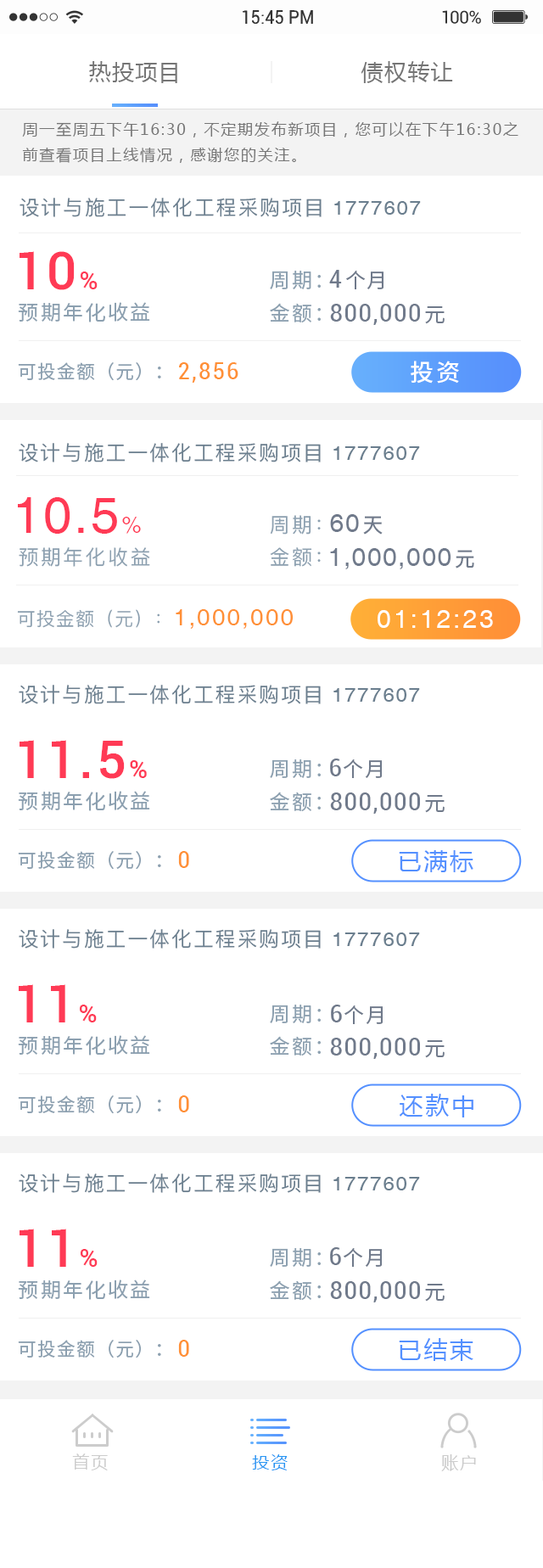
<style>
.page{position:relative;width:543px;height:1568px;background:#ffffff}
.page>*{position:absolute;margin:0}
.t1{font:17.4px "Roboto-Regular";color:#333333}
.t2{font:17.4px "Roboto-Regular";letter-spacing:-0.02em;color:#333333}
.t3{font:22.1px "MicrosoftYaHei";letter-spacing:0.05em;color:#757575}
.t4{font:15.3px/25.5px "MicrosoftYaHei";letter-spacing:0.1em;color:#757575}
.t5{font:20.4px "PingFang-SC-Medium";letter-spacing:0.075em;color:#6a7e8e}
.t6{font:20.4px "Helvetica";letter-spacing:0.075em;color:#6a7e8e}
.t7{font:52.6px "Roboto-Medium";letter-spacing:0.05em;color:#ff3a55}
.t8{font:25.5px "Roboto-Medium";letter-spacing:0.05em;color:#ff3a55}
.t9{font:20.4px "SourceHanSansCN-Regular";letter-spacing:0.05em;color:#6f798a}
.t10{font:25.5px "Roboto-Condensed";letter-spacing:0.05em;color:#6f798a}
.t11{font:20.4px "SourceHanSansCN-Regular";letter-spacing:0.1em;color:#8ca0b0}
.t12{font:25.5px "Roboto-Condensed";letter-spacing:0.05em;color:#707a8b}
.t13{font:20.4px "SourceHanSansCN-Regular";letter-spacing:0.05em;color:#707a8b}
.t14{font:18.7px "SourceHanSansCN-Regular";letter-spacing:0.05em;color:#8ca0b0}
.t15{font:23.8px "Roboto-Condensed";letter-spacing:0.075em;color:#ff9036}
.t16{font:23.8px "SourceHanSansCN-Medium";letter-spacing:0.1em;color:#ffffff}
.t17{font:50.9px "Helvetica";letter-spacing:0.05em;color:#ff3a55}
.t18{font:22.1px "Helvetica";letter-spacing:0.05em;color:#ff3a55}
.t19{font:20.4px "PingFang-SC-Medium";letter-spacing:0.1em;color:#8ca0b0}
.t20{font:25.5px "Helvetica";letter-spacing:0.05em;color:#707a8b}
.t21{font:20.4px "PingFang-SC-Bold";letter-spacing:0.05em;color:#707a8b}
.t22{font:18.7px "PingFang-SC-Medium";letter-spacing:0.05em;color:#8ca0b0}
.t23{font:23.8px "Helvetica";letter-spacing:0.075em;color:#ff9036}
.t24{font:25.5px "Helvetica";letter-spacing:0.1em;color:#ffffff}
.t25{font:23.8px "MicrosoftYaHei";letter-spacing:0.1em;color:#5490ff}
.t26{font:17px "MicrosoftYaHei";letter-spacing:0.1em;color:#cccccc}
.t27{font:17px "MicrosoftYaHei";letter-spacing:0.1em;color:#2696f3}
</style>
<div class="page">
<p class="t1" style="left:243px;top:10px;width:70px;height:14px">15:45 PM</p>
<p class="t2" style="left:442px;top:10px;width:39px;height:14px">100%</p>
<p class="t3" style="left:89px;top:61px;width:88px;height:22px">热投项目</p>
<p class="t3" style="left:89px;top:61px;width:88px;height:22px">热投项目</p>
<p class="t3" style="left:361px;top:61px;width:92px;height:22px">债权转让</p>
<p class="t3" style="left:361px;top:61px;width:92px;height:22px">债权转让</p>
<p class="t4" style="left:22px;top:121px;width:496px;height:42px">周一至周五下午16:30，不定期发布新项目，您可以在下午16:30之<br>前查看项目上线情况，感谢您的关注。</p>
<p class="t5" style="left:20px;top:198px;width:401px;height:19px">设计与施工一体化工程采购项目 <span class="t6">1777607</span></p>
<p class="t7" style="left:20px;top:251px;width:78px;height:39px">10<span class="t8">%</span></p>
<p class="t9" style="left:329px;top:270px;width:55px;height:19px"><span class="t10">4</span>个月</p>
<p class="t11" style="left:270px;top:271px;width:51px;height:18px">周期：</p>
<p class="t11" style="left:18px;top:302px;width:132px;height:20px">预期年化收益</p>
<p class="t11" style="left:270px;top:303px;width:51px;height:20px">金额：</p>
<p class="t12" style="left:330px;top:304px;width:115px;height:21px">800,000<span class="t13">元</span></p>
<p class="t14" style="left:18px;top:362px;width:143px;height:19px">可投金额（元）：</p>
<p class="t15" style="left:179px;top:362px;width:59px;height:21px">2,856</p>
<p class="t16" style="left:411px;top:361px;width:48px;height:23px">投资</p>
<p class="t5" style="left:19px;top:443px;width:401px;height:19px">设计与施工一体化工程采购项目 <span class="t6">1777607</span></p>
<p class="t17" style="left:18px;top:497px;width:123px;height:37px">10.5<span class="t18">%</span></p>
<p class="t19" style="left:270px;top:515px;width:51px;height:20px">周期：</p>
<p class="t20" style="left:330px;top:514px;width:53px;height:21px">60<span class="t21">天</span></p>
<p class="t19" style="left:19px;top:547px;width:131px;height:20px">预期年化收益</p>
<p class="t19" style="left:270px;top:547px;width:51px;height:20px">金额：</p>
<p class="t20" style="left:330px;top:548px;width:144px;height:21px">1,000,000<span class="t21">元</span></p>
<p class="t22" style="left:17px;top:609px;width:143px;height:19px">可投金额（元）：</p>
<p class="t23" style="left:176px;top:609px;width:117px;height:20px">1,000,000</p>
<p class="t24" style="left:378px;top:610px;width:115px;height:18px">01:12:23</p>
<p class="t5" style="left:19px;top:685px;width:401px;height:19px">设计与施工一体化工程采购项目 <span class="t6">1777607</span></p>
<p class="t7" style="left:20px;top:740px;width:127px;height:39px">11.5<span class="t8">%</span></p>
<p class="t11" style="left:270px;top:759px;width:51px;height:19px">周期：</p>
<p class="t9" style="left:330px;top:759px;width:52px;height:19px"><span class="t10">6</span>个月</p>
<p class="t11" style="left:18px;top:791px;width:132px;height:20px">预期年化收益</p>
<p class="t11" style="left:270px;top:792px;width:51px;height:20px">金额：</p>
<p class="t12" style="left:330px;top:792px;width:115px;height:22px">800,000<span class="t13">元</span></p>
<p class="t14" style="left:18px;top:851px;width:143px;height:19px">可投金额（元）：</p>
<p class="t15" style="left:178px;top:851px;width:11px;height:17px">0</p>
<p class="t25" style="left:399px;top:850px;width:74px;height:22px">已满标</p>
<p class="t5" style="left:19px;top:929px;width:401px;height:20px">设计与施工一体化工程采购项目 <span class="t6">1777607</span></p>
<p class="t7" style="left:19px;top:984px;width:78px;height:38px">11<span class="t8">%</span></p>
<p class="t11" style="left:270px;top:1005px;width:51px;height:18px">周期：</p>
<p class="t9" style="left:331px;top:1005px;width:52px;height:19px"><span class="t10">6</span>个月</p>
<p class="t11" style="left:18px;top:1035px;width:132px;height:21px">预期年化收益</p>
<p class="t11" style="left:270px;top:1036px;width:51px;height:20px">金额：</p>
<p class="t12" style="left:330px;top:1038px;width:115px;height:21px">800,000<span class="t13">元</span></p>
<p class="t14" style="left:18px;top:1095px;width:143px;height:19px">可投金额（元）：</p>
<p class="t15" style="left:178px;top:1095px;width:11px;height:17px">0</p>
<p class="t25" style="left:400px;top:1094px;width:73px;height:23px">还款中</p>
<p class="t5" style="left:19px;top:1173px;width:401px;height:20px">设计与施工一体化工程采购项目 <span class="t6">1777607</span></p>
<p class="t7" style="left:20px;top:1229px;width:78px;height:38px">11<span class="t8">%</span></p>
<p class="t11" style="left:270px;top:1248px;width:51px;height:19px">周期：</p>
<p class="t9" style="left:330px;top:1247px;width:52px;height:20px"><span class="t10">6</span>个月</p>
<p class="t11" style="left:18px;top:1280px;width:132px;height:20px">预期年化收益</p>
<p class="t11" style="left:270px;top:1280px;width:51px;height:21px">金额：</p>
<p class="t12" style="left:330px;top:1281px;width:115px;height:21px">800,000<span class="t13">元</span></p>
<p class="t14" style="left:18px;top:1340px;width:143px;height:18px">可投金额（元）：</p>
<p class="t15" style="left:178px;top:1340px;width:11px;height:17px">0</p>
<p class="t25" style="left:399px;top:1338px;width:74px;height:23px">已结束</p>
<p class="t26" style="left:72px;top:1453px;width:36px;height:17px">首页</p>
<p class="t27" style="left:252px;top:1454px;width:36px;height:16px">投资</p>
<p class="t26" style="left:441px;top:1454px;width:35px;height:17px">账户</p>
</div>
